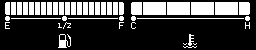
<style>
.page{position:relative;width:256px;height:50px;background:#000000}
.page>*{position:absolute;margin:0}
.t1{font:12px "ProFontWindows";color:#ffffff}
.t2{font:9px "ProFontWindows";color:#ffffff}
</style>
<div class="page">
<p class="t1" style="left:5px;top:22px;width:5px;height:7px">E</p>
<p class="t2" style="left:58px;top:22px;width:13px;height:8px">1/2</p>
<p class="t1" style="left:119px;top:22px;width:5px;height:7px">F</p>
<p class="t1" style="left:131px;top:22px;width:5px;height:7px">C</p>
<p class="t1" style="left:245px;top:22px;width:5px;height:7px">H</p>
</div>
